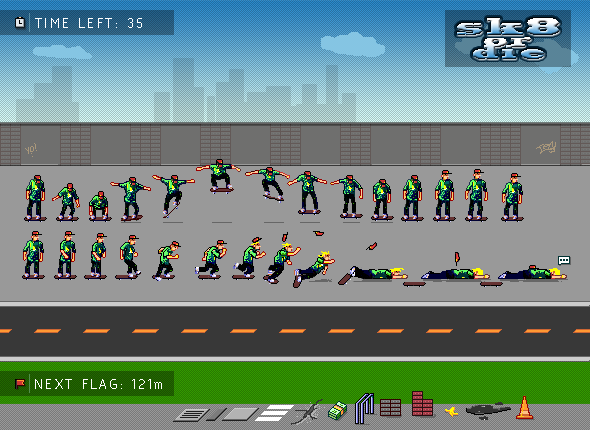
<style>
.page{position:relative;width:590px;height:430px;background:#999999}
.page>*{position:absolute;margin:0}
.t1{font:18px "Acid";letter-spacing:0.131em;color:#ffffff}
</style>
<div class="page">
<p class="t1" style="left:35px;top:18px;width:107px;height:10px">TIME LEFT: 35</p>
<p class="t1" style="left:35px;top:379px;width:127px;height:10px">NEXT FLAG: 121m</p>
</div>
